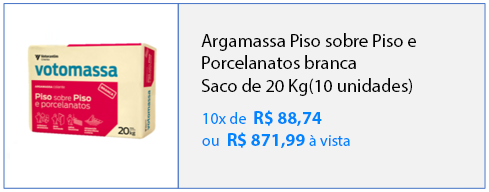
<style>
.page{position:relative;width:489px;height:192px;background:#f2f2f2}
.page>*{position:absolute;margin:0}
.t1{font:18.6px "MyriadPro-Regular";color:#000000}
.t2{font:18px "MyriadPro-Bold";color:#0084ff}
.t3{font:16px "MyriadPro-Regular";color:#0084ff}
</style>
<div class="page">
<p class="t1" style="left:201px;top:33px;width:215px;height:63px">Argamassa Piso sobre Piso e <br>Porcelanatos branca<br>Saco de 20 Kg(10 unidades)</p>
<p class="t2" style="left:202px;top:110px;width:148px;height:38px"><span class="t3">10x de  </span>R$ 88,74<br><span class="t3">ou  </span>R$ 871,99 <span class="t3">à vista</span></p>
</div>
